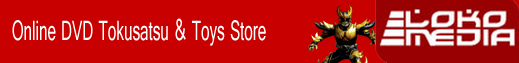
<style>
.page{position:relative;width:519px;height:63px;background:#c80000}
.page>*{position:absolute;margin:0}
.t1{font:30px "Raavi";color:#fcfcfc;scale:0.56 1}
</style>
<div class="page">
<p class="t1" style="left:12px;top:18px;width:254px;height:28px">Online DVD Tokusatsu &amp; Toys Store</p>
</div>
